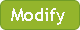
<style>
.page{position:relative;width:80px;height:30px;background:#94b52c}
.page>*{position:absolute;margin:0}
.t1{font:18.4px "TrebuchetMS";color:#fcfcfe}
</style>
<div class="page">
<p class="t1" style="left:11px;top:8px;width:54px;height:17px">Modify</p>
</div>
